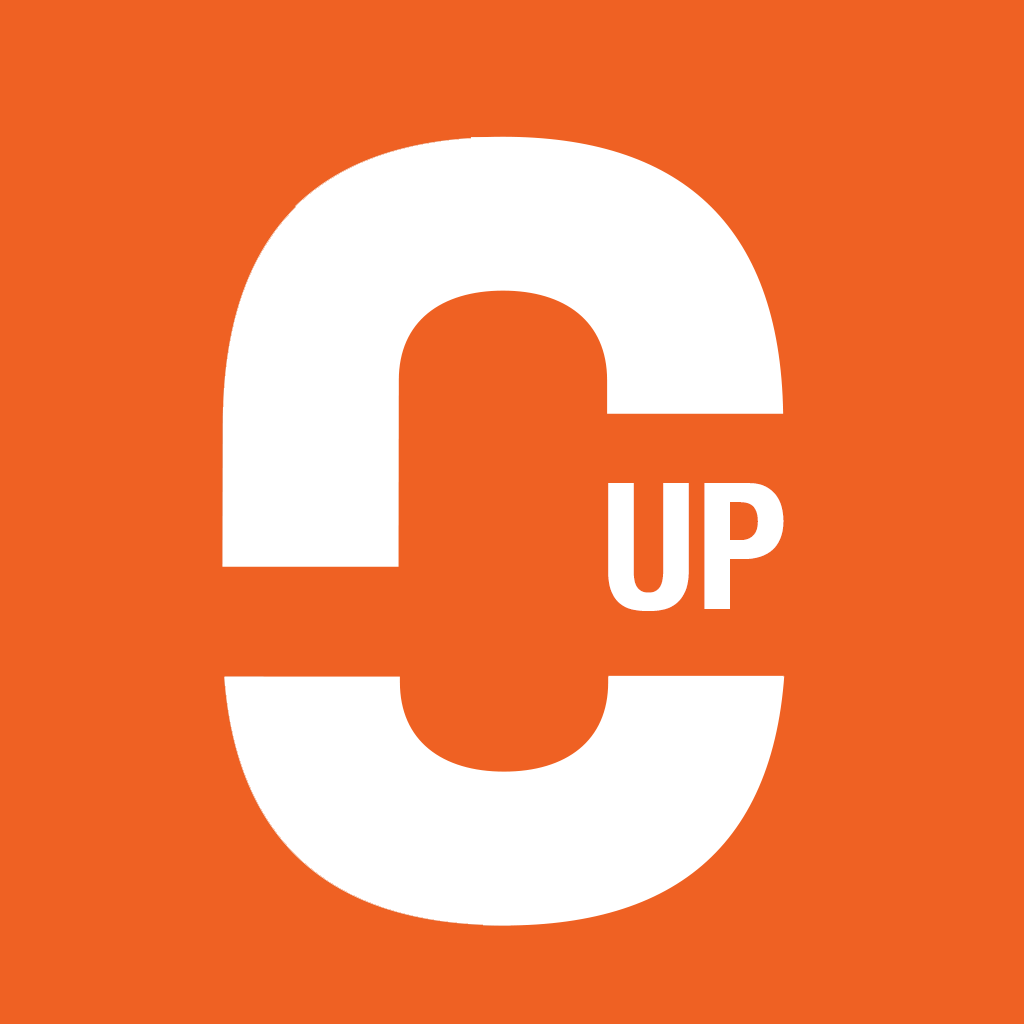
<style>
.page{position:relative;width:1024px;height:1024px;background:#ef6123}
.page>*{position:absolute;margin:0}
.t1{font:176px "HelveticaNeue-CondensedBold";color:#ffffff}
</style>
<div class="page">
<p class="t1" style="left:608px;top:483px;width:176px;height:128px">UP</p>
</div>
